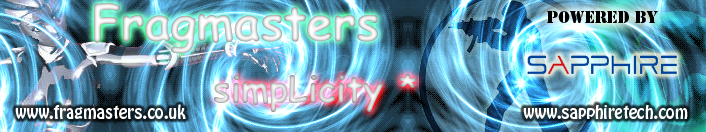
<style>
.page{position:relative;width:706px;height:132px}
.page>*{position:absolute;margin:0}
.t1{font:48px "ComicSansMS-Bold"}
.t2{font:16px "StencilStd";color:#000000}
.t3{font:16px "HoboStd";color:#ffffff}
</style>
<div class="page">
<p class="t1" style="left:94px;top:3px;width:284px;height:51px">Fragmasters</p>
<p class="t2" style="left:547px;top:11px;width:111px;height:12px">POWERED BY</p>
<p class="t3" style="left:15px;top:104px;width:171px;height:15px">www.fragmasters.co.uk</p>
<p class="t3" style="left:523px;top:104px;width:165px;height:15px">www.sapphiretech.com</p>
</div>
